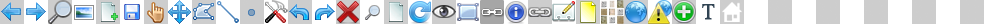
<style>
.page{position:relative;width:1000px;height:24px;background:#cdcdcd}
.page>*{position:absolute;margin:0}
.t1{font:21.8px "TimesNewRomanPSMT";letter-spacing:-0.02em;color:#314453;font-weight:bold;scale:0.95 1}
</style>
<div class="page">
<p class="t1" style="left:702px;top:4px;width:13px;height:16px">T</p>
</div>
